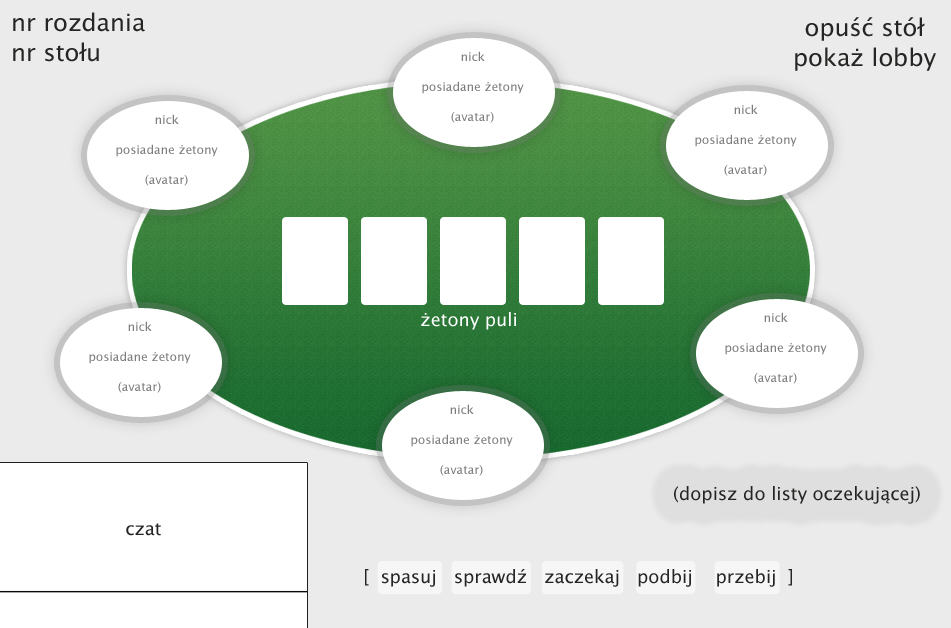
<style>
.page{position:relative;width:951px;height:628px;background:#ebebeb}
.page>*{position:absolute;margin:0}
.t1{font:24px/30px "LucidaSansUnicode";color:#252523}
.t2{font:12px/30px "LucidaSansUnicode";color:#7e7e7e}
.t3{font:18px "LucidaSansUnicode";color:#ffffff}
.t4{font:18px "LucidaSansUnicode";color:#252523}
</style>
<div class="page">
<p class="t1" style="left:13px;top:12px;width:132px;height:50px">nr rozdania<br>nr stołu</p>
<p class="t1" style="left:795px;top:17px;width:141px;height:54px;text-align:center">opuść stół<br>pokaż lobby</p>
<p class="t2" style="left:422px;top:51px;width:102px;height:72px;text-align:center">nick<br>posiadane żetony<br>(avatar)<br>a</p>
<p class="t2" style="left:695px;top:104px;width:102px;height:72px;text-align:center">nick<br>posiadane żetony<br>(avatar)<br>a</p>
<p class="t2" style="left:116px;top:114px;width:102px;height:72px;text-align:center">nick<br>posiadane żetony<br>(avatar)<br>a</p>
<p class="t3" style="left:421px;top:312px;width:95px;height:18px">żetony puli</p>
<p class="t2" style="left:725px;top:312px;width:102px;height:72px;text-align:center">nick<br>posiadane żetony<br>(avatar)<br>a</p>
<p class="t2" style="left:89px;top:321px;width:102px;height:72px;text-align:center">nick<br>posiadane żetony<br>(avatar)<br>a</p>
<p class="t2" style="left:411px;top:404px;width:102px;height:72px;text-align:center">nick<br>posiadane żetony<br>(avatar)<br>a</p>
<p class="t4" style="left:674px;top:486px;width:246px;height:18px">(dopisz do listy oczekującej)</p>
<p class="t4" style="left:126px;top:523px;width:35px;height:13px">czat</p>
<p class="t4" style="left:365px;top:569px;width:427px;height:18px">[  spasuj   sprawdź   zaczekaj   podbij    przebij  ]</p>
</div>
